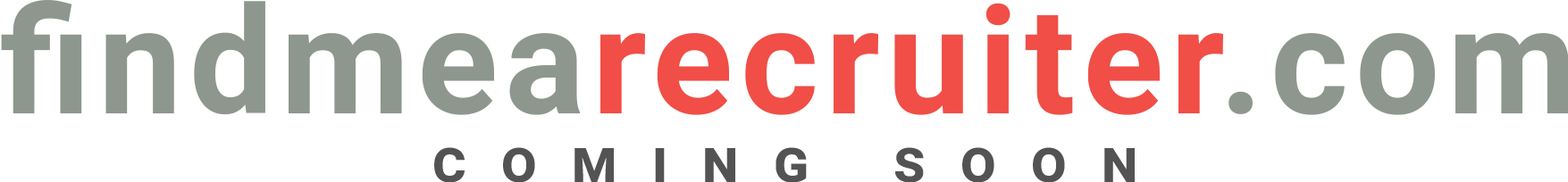
<style>
.page{position:relative;width:1568px;height:182px;background:#ffffff}
.page>*{position:absolute;margin:0}
.t1{font:148.9px "Roboto-Bold";letter-spacing:0.05em;color:#f04e46}
.t2{font:148.9px "Roboto-Bold";letter-spacing:0.05em;color:#8d978d}
.t3{font:59.6px "Roboto-Bold";letter-spacing:0.59em;color:#535353;font-variant:small-caps}
</style>
<div class="page">
<p class="t1" style="left:1px;top:0px;width:1568px;height:115px"><span class="t2">findmea</span>recruiter<span class="t2">.com</span></p>
<p class="t3" style="left:434px;top:147px;width:701px;height:36px">coming soon</p>
</div>
